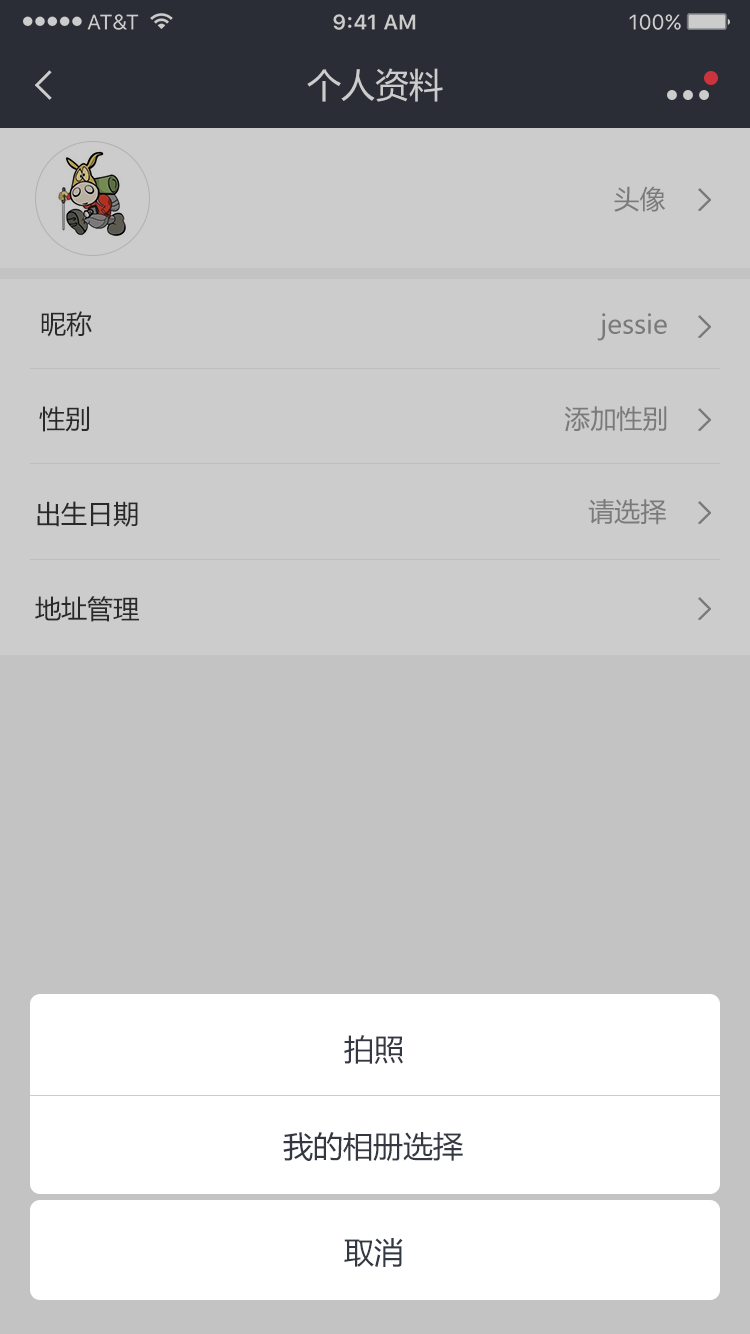
<style>
.page{position:relative;width:750px;height:1334px;background:#cccccc}
.page>*{position:absolute;margin:0}
.t1{font:34px "MicrosoftYaHei";color:#cccccc}
.t2{font:26px "MicrosoftYaHei";color:#7a7a7a}
.t3{font:26px "MicrosoftYaHei";color:#333333}
.t4{font:30px "MicrosoftYaHei";color:#343843}
</style>
<div class="page">
<p class="t1" style="left:307px;top:68px;width:136px;height:34px">个人资料</p>
<p class="t2" style="left:614px;top:186px;width:52px;height:26px">头像</p>
<p class="t3" style="left:41px;top:311px;width:51px;height:26px">昵称</p>
<p class="t2" style="left:597px;top:313px;width:70px;height:28px">jessie</p>
<p class="t3" style="left:39px;top:406px;width:50px;height:26px">性别</p>
<p class="t2" style="left:564px;top:406px;width:103px;height:26px">添加性别</p>
<p class="t3" style="left:37px;top:501px;width:101px;height:26px">出生日期</p>
<p class="t2" style="left:588px;top:499px;width:78px;height:26px">请选择</p>
<p class="t3" style="left:35px;top:596px;width:104px;height:26px">地址管理</p>
<p class="t4" style="left:344px;top:1035px;width:59px;height:29px">拍照</p>
<p class="t4" style="left:283px;top:1132px;width:180px;height:29px">我的相册选择</p>
<p class="t4" style="left:344px;top:1238px;width:59px;height:29px">取消</p>
</div>
